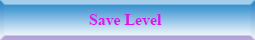
<style>
.page{position:relative;width:255px;height:40px}
.page>*{position:absolute;margin:0}
.t1{font:15.8px "TimesNewRomanPS-BoldMT";color:#d815ed}
</style>
<div class="page">
<p class="t1" style="left:89px;top:14px;width:73px;height:11px">Save Level</p>
</div>
